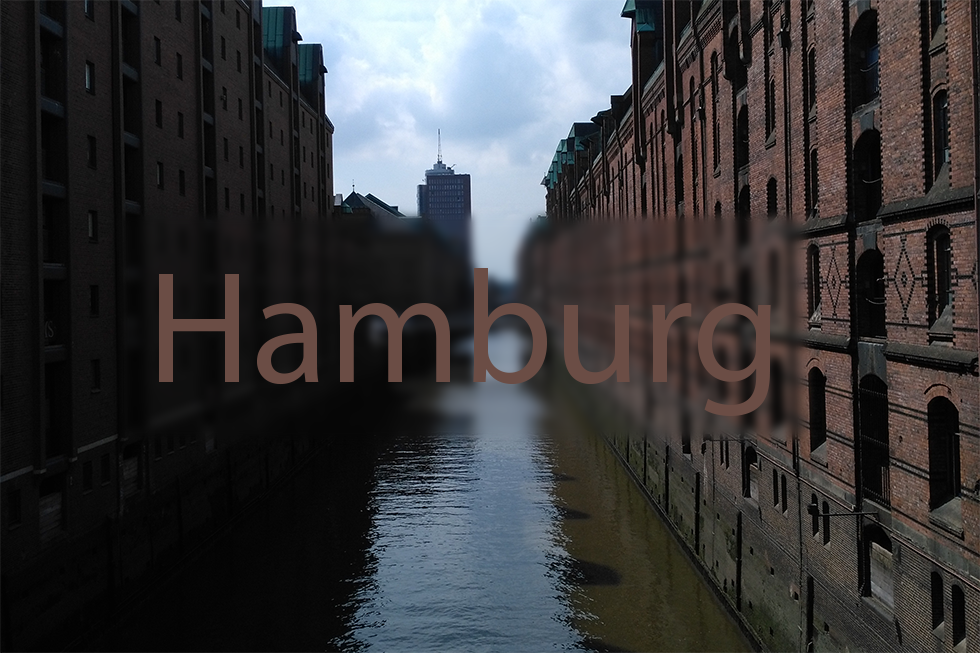
<style>
.page{position:relative;width:980px;height:653px}
.page>*{position:absolute;margin:0}
.t1{font:160px "MyriadPro-Regular";color:#6b4d45}
</style>
<div class="page">
<p class="t1" style="left:159px;top:268px;width:612px;height:148px">Hamburg</p>
</div>
